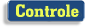
<style>
.page{position:relative;width:85px;height:28px;background:#1f497d}
.page>*{position:absolute;margin:0}
.t1{font:17.8px "GeometricSlab703BT-BoldCond";color:#edfb56;scale:1.32 1}
</style>
<div class="page">
<p class="t1" style="left:16px;top:4px;width:63px;height:13px">Controle</p>
</div>
